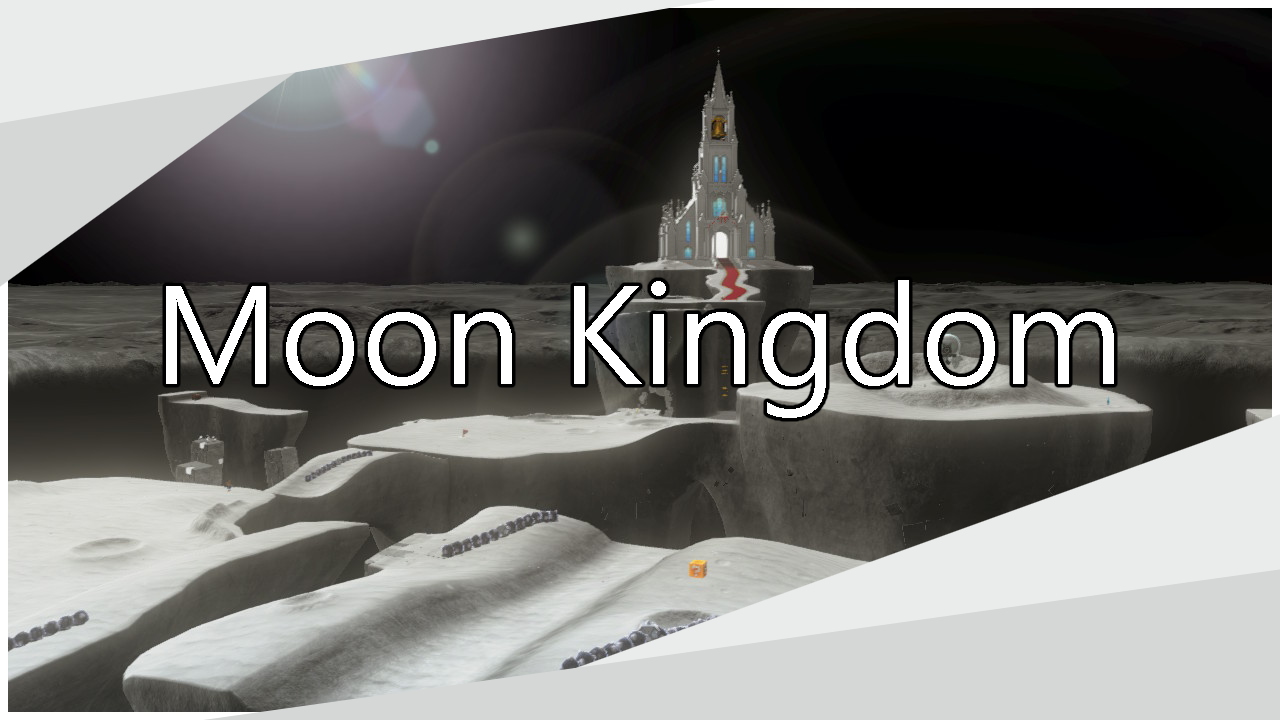
<style>
.page{position:relative;width:1280px;height:720px}
.page>*{position:absolute;margin:0}
.t1{font:140px "SegoeUI";color:#ffffff}
</style>
<div class="page">
<p class="t1" style="left:166px;top:280px;width:948px;height:138px">Moon Kingdom</p>
</div>
